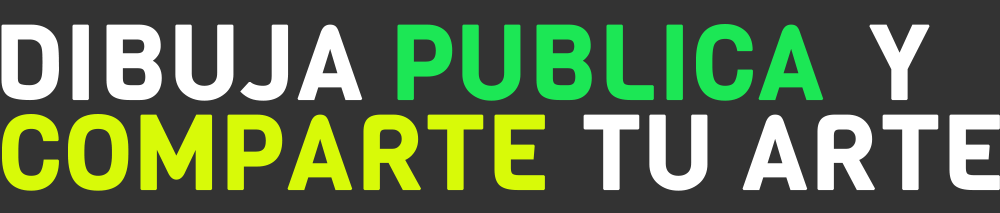
<style>
.page{position:relative;width:1000px;height:213px;background:#333333}
.page>*{position:absolute;margin:0}
.t1{font:102.9px "Viga-Regular";color:#ffffff;font-weight:bold}
.t2{font:102.9px "Viga-Regular";color:#1ce755;font-weight:bold}
.t3{font:102.9px "Viga-Regular";color:#d8fa08;font-weight:bold}
</style>
<div class="page">
<p class="t1" style="left:1px;top:24px;width:362px;height:77px">DIBUJA</p>
<p class="t2" style="left:397px;top:24px;width:427px;height:77px">PUBLICA</p>
<p class="t1" style="left:869px;top:24px;width:61px;height:77px">Y</p>
<p class="t3" style="left:2px;top:114px;width:543px;height:77px">COMPARTE</p>
<p class="t1" style="left:583px;top:114px;width:417px;height:77px">TU ARTE</p>
</div>
